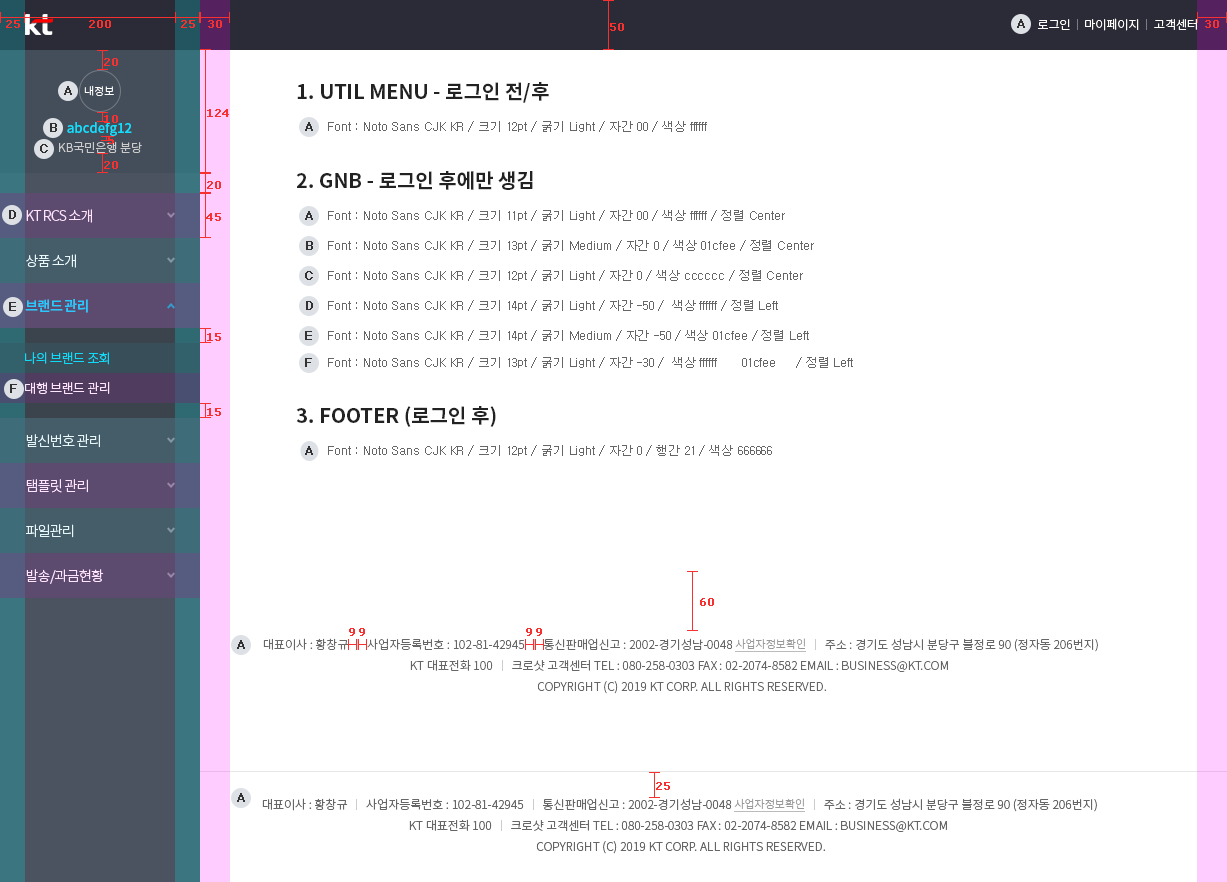
<style>
.page{position:relative;width:1227px;height:882px;background:#ffffff}
.page>*{position:absolute;margin:0}
.t1{font:12px "NotoSansCJKkr-Light";color:#ffffff;text-transform:uppercase}
.t2{font:11px "NotoSansCJKkr-Light";color:#ffffff}
.t3{font:20px "NotoSansCJKkr-Bold";color:#222222;text-transform:uppercase}
.t4{font:13px "NotoSansCJKkr-Medium";letter-spacing:0.01em;color:#0fe0ff}
.t5{font:12px "Dotum";color:#323232;font-weight:bold}
.t6{font:12px "Dotum";color:#666666}
.t7{font:12px "NotoSansCJKkr-Light";color:#cccccc}
.t8{font:14px "NotoSansCJKkr-Light";letter-spacing:-0.05em;color:#ffe5ff}
.t9{font:14px "NotoSansCJKkr-Light";letter-spacing:-0.05em;color:#ffffff}
.t10{font:12px "Dotum";color:#323232;text-transform:uppercase;font-weight:bold}
.t11{font:14px "NotoSansCJKkr-Medium";letter-spacing:-0.05em;color:#0fe0ff}
.t12{font:13px "NotoSansCJKkr-Light";letter-spacing:-0.03em;color:#0fe0ff}
.t13{font:13px "NotoSansCJKkr-Light";letter-spacing:-0.03em;color:#ffe5ff}
.t14{font:12px/21px "NotoSansCJKkr-Light";color:#666666;text-transform:uppercase}
.t15{font:11px/21px "NotoSansCJKkr-Light";color:#999999;text-transform:uppercase}
</style>
<div class="page">
<p class="t1" style="left:1038px;top:19px;width:32px;height:11px">로그인</p>
<p class="t1" style="left:1085px;top:18px;width:54px;height:13px">마이페이지</p>
<p class="t1" style="left:1154px;top:19px;width:43px;height:11px">고객센터</p>
<p class="t2" style="left:84px;top:85px;width:30px;height:11px">내정보</p>
<p class="t3" style="left:297px;top:82px;width:252px;height:21px">1. util menu - 로그인 전/후</p>
<p class="t4" style="left:67px;top:122px;width:65px;height:14px">abcdefg12</p>
<p class="t5" style="left:305px;top:122px;width:8px;height:9px">A</p>
<p class="t6" style="left:328px;top:121px;width:379px;height:11px">Font : Noto Sans CJK KR / 크기 12pt / 굵기 Light / 자간 00 / 색상 ffffff</p>
<p class="t7" style="left:59px;top:141px;width:83px;height:12px">KB국민은행 분당</p>
<p class="t3" style="left:296px;top:171px;width:237px;height:19px">2. GNB - 로그인 후에만 생김</p>
<p class="t8" style="left:26px;top:209px;width:66px;height:14px">KT RCS 소개</p>
<p class="t5" style="left:305px;top:211px;width:8px;height:9px">A</p>
<p class="t6" style="left:328px;top:210px;width:457px;height:11px">Font : Noto Sans CJK KR / 크기 11pt / 굵기 Light / 자간 00 / 색상 ffffff / 정렬 Center</p>
<p class="t5" style="left:306px;top:241px;width:7px;height:9px">B</p>
<p class="t6" style="left:328px;top:240px;width:486px;height:11px">Font : Noto Sans CJK KR / 크기 13pt / 굵기 Medium / 자간 0 / 색상 01cfee / 정렬 Center</p>
<p class="t9" style="left:26px;top:254px;width:50px;height:14px">상품 소개</p>
<p class="t6" style="left:328px;top:270px;width:475px;height:11px">Font : Noto Sans CJK KR / 크기 12pt / 굵기 Light / 자간 0 / 색상 cccccc / 정렬 Center</p>
<p class="t10" style="left:305px;top:271px;width:8px;height:9px">c</p>
<p class="t11" style="left:25px;top:299px;width:63px;height:14px">브랜드 관리</p>
<p class="t5" style="left:306px;top:301px;width:7px;height:9px">D</p>
<p class="t6" style="left:328px;top:300px;width:450px;height:11px">Font : Noto Sans CJK KR / 크기 14pt / 굵기 Light / 자간 -50 /  색상 ffffff / 정렬 Left</p>
<p class="t10" style="left:305px;top:331px;width:7px;height:9px">E</p>
<p class="t6" style="left:328px;top:330px;width:481px;height:11px">Font : Noto Sans CJK KR / 크기 14pt / 굵기 Medium / 자간 -50 / 색상 01cfee / 정렬 Left</p>
<p class="t12" style="left:25px;top:352px;width:84px;height:13px">나의 브랜드 조회</p>
<p class="t10" style="left:305px;top:358px;width:7px;height:9px">f</p>
<p class="t6" style="left:328px;top:357px;width:525px;height:11px">Font : Noto Sans CJK KR / 크기 13pt / 굵기 Light / 자간 -30 /  색상 ffffff      01cfee     / 정렬 Left</p>
<p class="t13" style="left:25px;top:382px;width:85px;height:12px">대행 브랜드 관리</p>
<p class="t3" style="left:296px;top:406px;width:200px;height:21px">3. footer (로그인 후)</p>
<p class="t9" style="left:26px;top:434px;width:74px;height:14px">발신번호 관리</p>
<p class="t5" style="left:305px;top:446px;width:8px;height:9px">A</p>
<p class="t6" style="left:328px;top:445px;width:444px;height:11px">Font : Noto Sans CJK KR / 크기 12pt / 굵기 Light / 자간 0 / 행간 21 / 색상 666666</p>
<p class="t8" style="left:26px;top:479px;width:62px;height:14px">탬플릿 관리</p>
<p class="t9" style="left:26px;top:524px;width:48px;height:14px">파일관리</p>
<p class="t8" style="left:26px;top:569px;width:78px;height:15px">발송/과금현황</p>
<p class="t14" style="left:263px;top:638px;width:835px;height:56px;text-align:center">대표이사 : 황창규       사업자등록번호 : 102-81-42945       통신판매업신고 : 2002-경기성남-0048 <span class="t15">사업자정보확인</span>       주소 : 경기도 성남시 분당구 불정로 90 (정자동 206번지) <br>KT 대표전화 100       크로샷 고객센터 TEL : 080-258-0303 FAX : 02-2074-8582 email : business@kt.com  <br>Copyright (c) 2019 kt corp. all rights reserved.</p>
</div>
